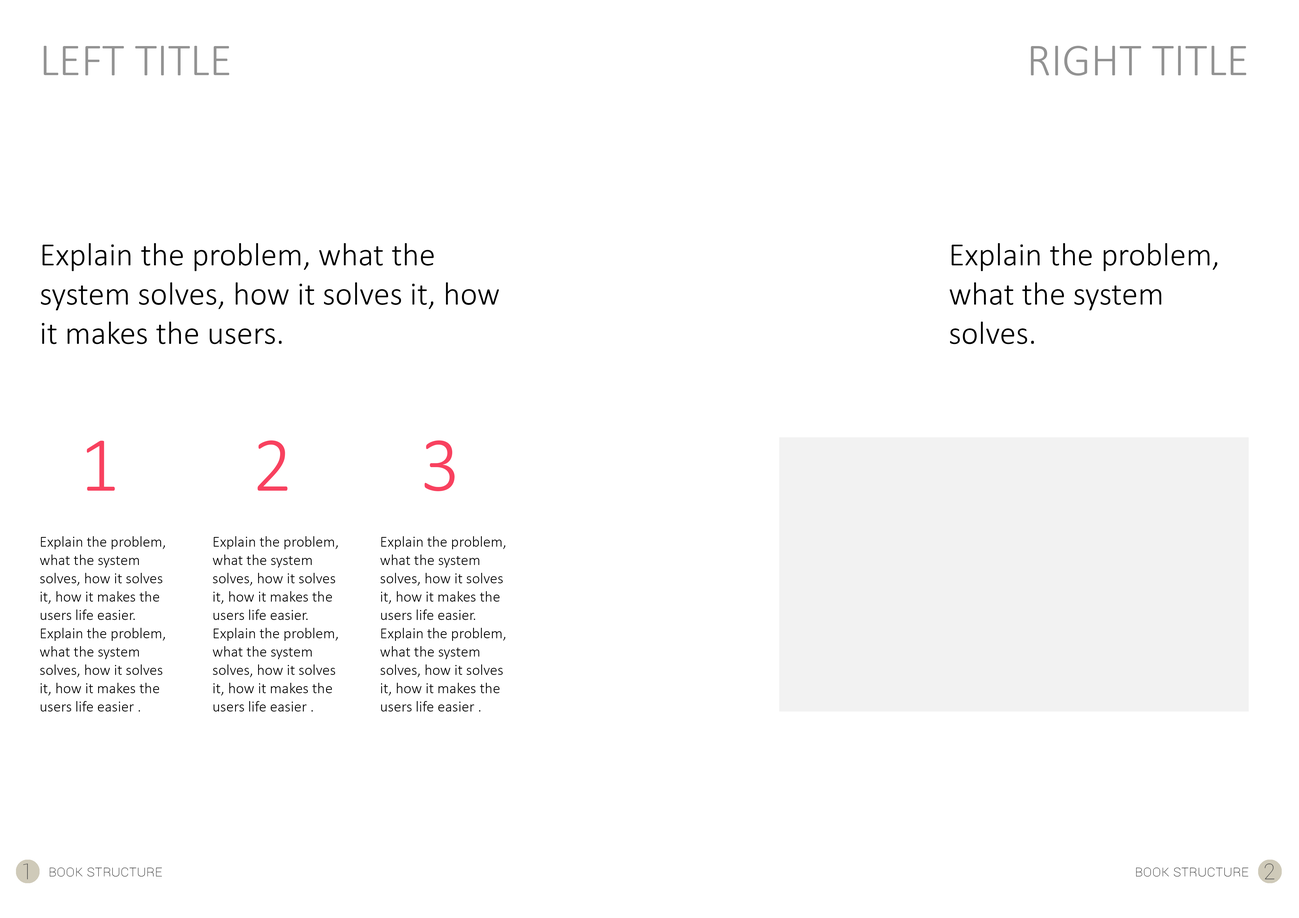
<style>
.page{position:relative;width:1299px;height:918px;background:#ffffff}
.page>*{position:absolute;margin:0}
.t1{font:45.8px "Calibri-Light";color:#939393;text-transform:uppercase}
.t2{font:45.8px "Calibri-Light";color:#929292;text-transform:uppercase}
.t3{font:32.7px "Calibri-Light";color:#000000}
.t4{font:78.5px "Calibri-Light";color:#f8415f}
.t5{font:15.3px "Calibri-Light";color:#000000}
.t6{font:21.8px "Roboto-Thin";color:#484848}
.t7{font:15.3px "Roboto-Thin";color:#000000;font-variant:small-caps}
</style>
<div class="page">
<p class="t1" style="left:44px;top:46px;width:185px;height:29px">left title</p>
<p class="t2" style="left:1031px;top:46px;width:215px;height:30px">right title</p>
<p class="t3" style="left:41px;top:243px;width:458px;height:101px">Explain the problem, what the system solves, how it solves it, how it makes the users.</p>
<p class="t3" style="left:949px;top:243px;width:268px;height:101px">Explain the problem, what the system solves.</p>
<p class="t4" style="left:87px;top:441px;width:28px;height:50px">1</p>
<p class="t4" style="left:257px;top:441px;width:30px;height:50px">2</p>
<p class="t4" style="left:424px;top:441px;width:30px;height:50px">3</p>
<p class="t5" style="left:40px;top:536px;width:125px;height:176px">Explain the problem, what the system solves, how it solves it, how it makes the users life easier. Explain the problem, what the system solves, how it solves it, how it makes the users life easier .</p>
<p class="t5" style="left:213px;top:536px;width:125px;height:176px">Explain the problem, what the system solves, how it solves it, how it makes the users life easier. Explain the problem, what the system solves, how it solves it, how it makes the users life easier .</p>
<p class="t5" style="left:380px;top:536px;width:125px;height:176px">Explain the problem, what the system solves, how it solves it, how it makes the users life easier. Explain the problem, what the system solves, how it solves it, how it makes the users life easier .</p>
<p class="t6" style="left:23px;top:864px;width:5px;height:16px">1</p>
<p class="t7" style="left:50px;top:868px;width:112px;height:9px">Book structure</p>
<p class="t7" style="left:1136px;top:868px;width:112px;height:9px">Book structure</p>
<p class="t6" style="left:1264px;top:864px;width:10px;height:16px">2</p>
</div>
